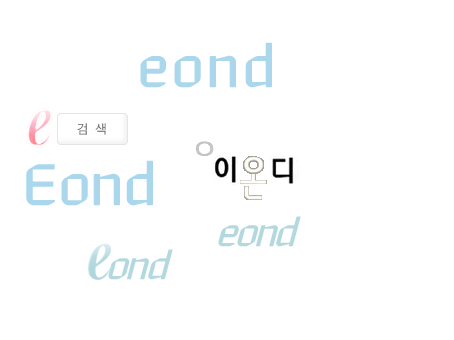
<style>
.page{position:relative;width:454px;height:340px;background:#ffffff}
.page>*{position:absolute;margin:0}
.t1{font:60px "YouAndI";color:#abd7ec}
.t2{font:60px "YouAndI";letter-spacing:-0.05em;color:#abd7ec}
.t3{font:40px "YouandiOblique";letter-spacing:-0.1em;color:#b3d9df}
</style>
<div class="page">
<p class="t1" style="left:140px;top:42px;width:132px;height:46px">eond</p>
<p class="t2" style="left:26px;top:160px;width:127px;height:46px">Eond</p>
<p class="t3" style="left:218px;top:216px;width:83px;height:31px">eond</p>
<p class="t3" style="left:108px;top:249px;width:65px;height:31px">ond</p>
</div>
